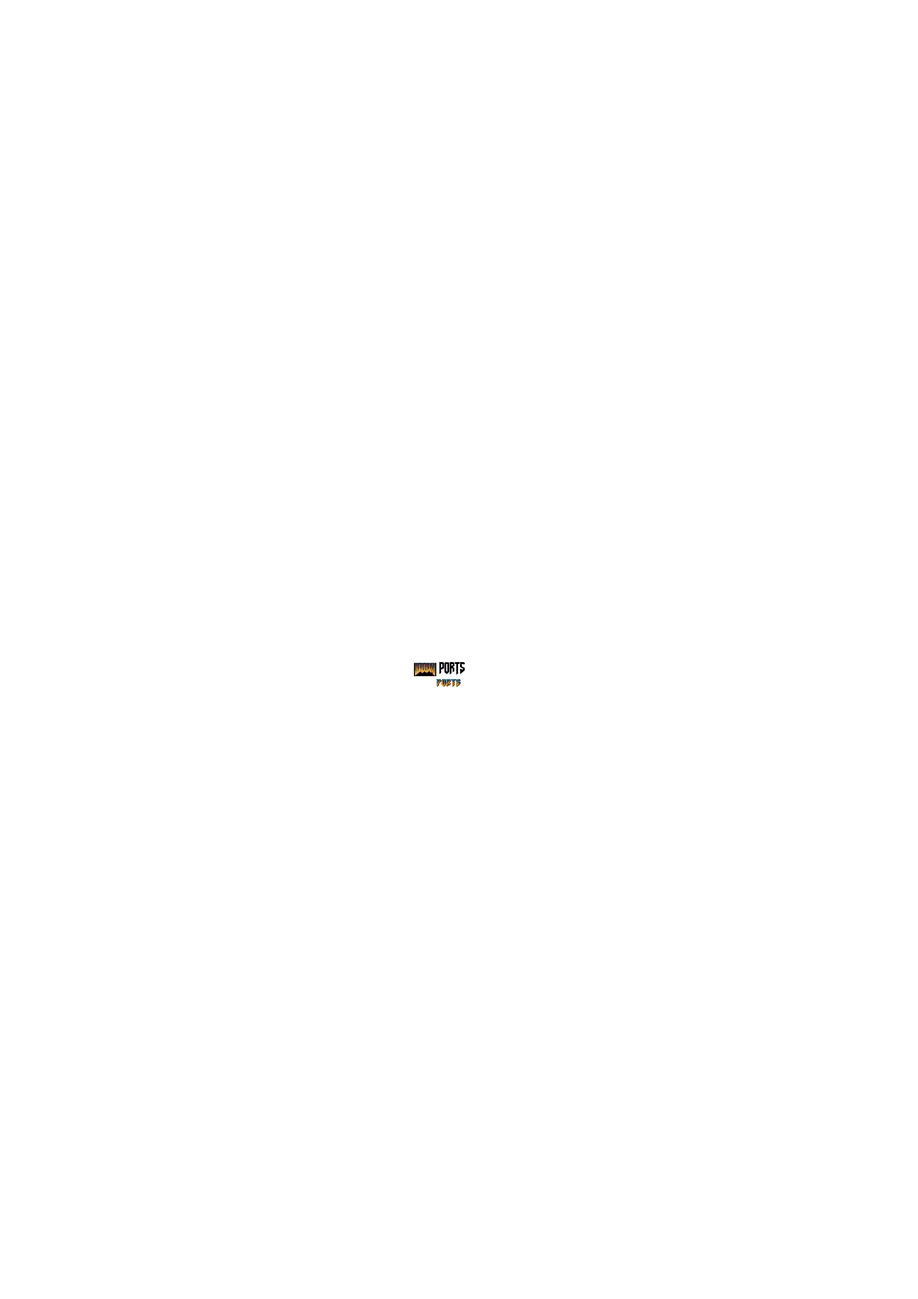
<style>
.page{position:relative;width:918px;height:1299px;background:#ffffff}
.page>*{position:absolute;margin:0}
.t1{font:15.4px "AmazDooMLeft";color:#000000}
</style>
<div class="page">
<p class="t1" style="left:439px;top:662px;width:26px;height:13px">PORTS</p>
</div>
